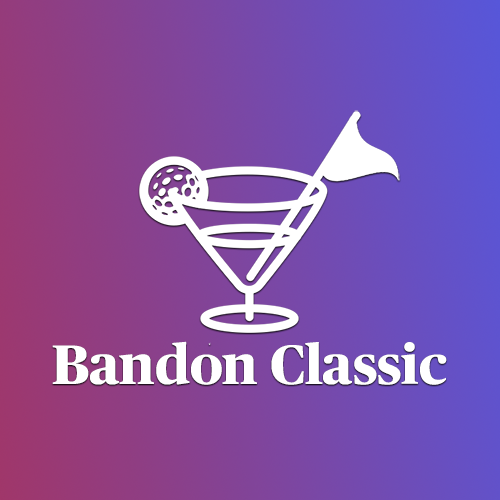
<style>
.page{position:relative;width:500px;height:500px}
.page>*{position:absolute;margin:0}
.t1{font:55.7px "PublicoHeadlineWeb-Extrabold";color:#ffffff}
</style>
<div class="page">
<p class="t1" style="left:52px;top:341px;width:395px;height:44px">Bandon Classic</p>
</div>
